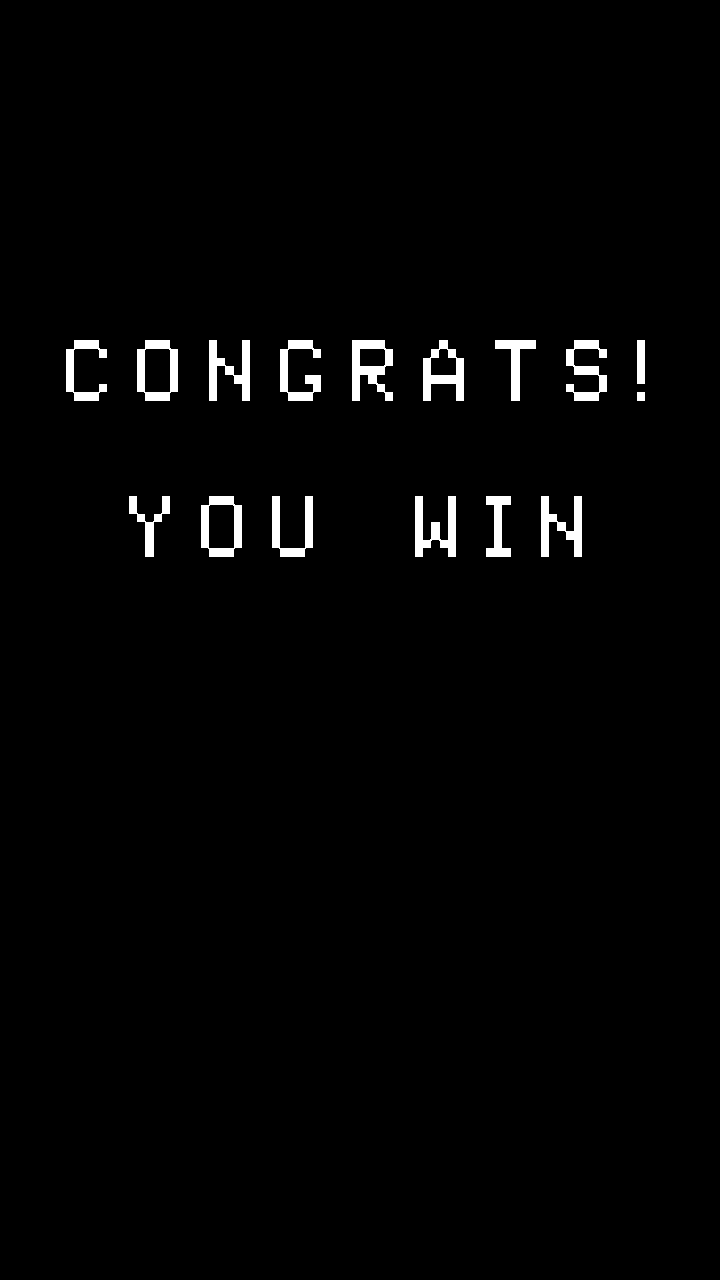
<style>
.page{position:relative;width:720px;height:1280px;background:#000000}
.page>*{position:absolute;margin:0}
.t1{font:88.9px/156.4px "PixelTandysoft";letter-spacing:0.26em;color:#ffffff;scale:0.95 1}
</style>
<div class="page">
<p class="t1" style="left:66px;top:340px;width:579px;height:217px;text-align:center">Congrats!<br>you win</p>
</div>
